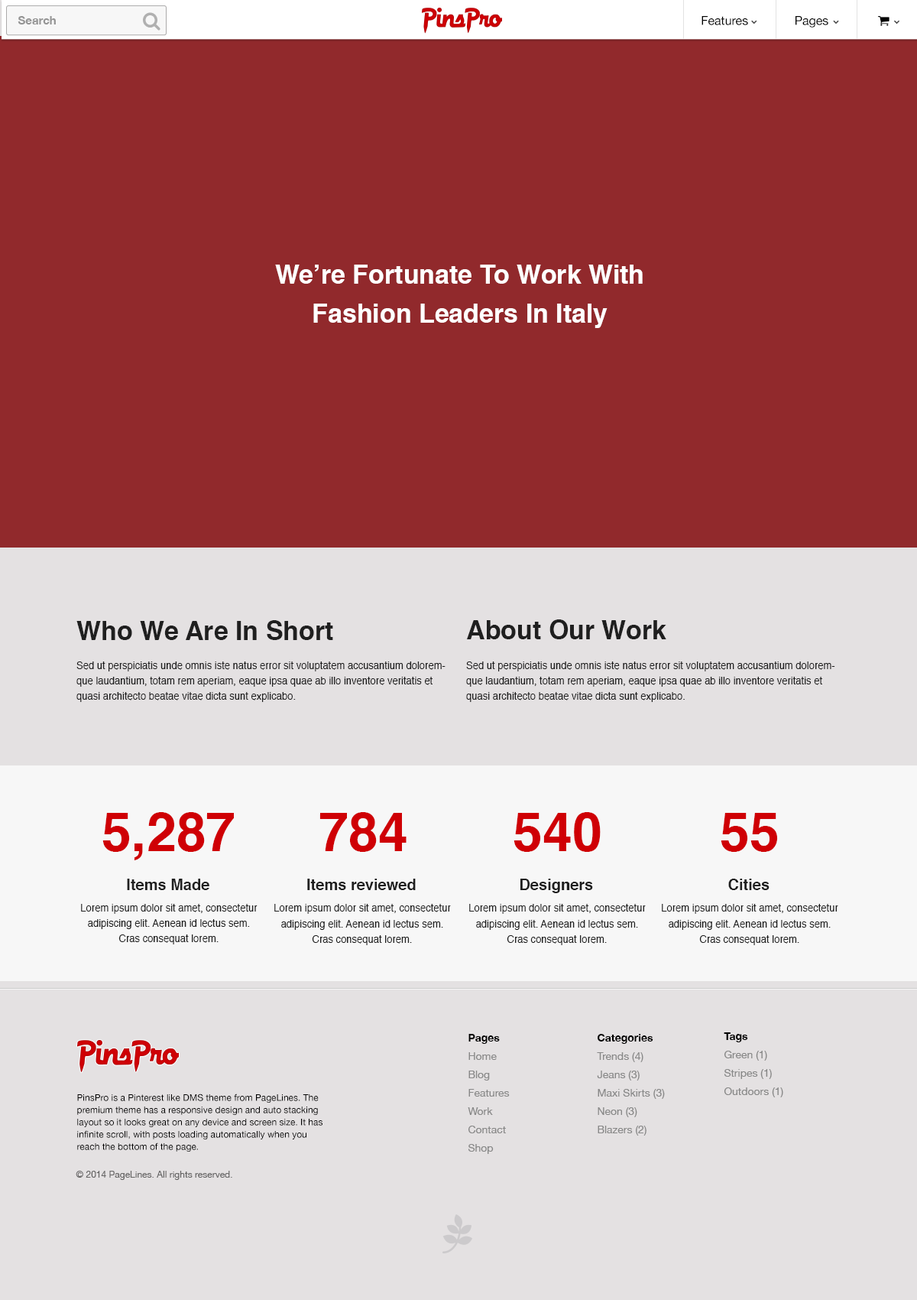
<style>
.page{position:relative;width:917px;height:1300px;background:#91292c}
.page>*{position:absolute;margin:0}
.t1{font:11.5px "HelveticaNeue-Bold";color:#959595}
.t2{font:26px/38.3px "Helvetica-Bold";color:#ffffff}
.t3{font:26px "Helvetica-Bold";color:#1f1f1f}
.t4{font:9.9px/15.3px "Helvetica";color:#1f1f1f}
.t5{font:53.6px "Helvetica-Bold";color:#cf0005}
.t6{font:15.3px "Helvetica-Bold";color:#1f1f1f}
.t7{font:10px/15.3px "Helvetica";color:#1f1f1f}
.t8{font:10.7px/18.3px "MyriadPro-Regular";color:#888888}
.t9{font:10.7px/18.3px "MyriadPro-Regular";color:#000000}
.t10{font:9.2px "HelveticaNeue";color:#000000}
.t11{font:9.2px "MyriadPro-Regular";color:#666565}
</style>
<div class="page">
<p class="t1" style="left:18px;top:16px;width:38px;height:8px">Search</p>
<p class="t2" style="left:275px;top:265px;width:368px;height:63px;text-align:center">We’re Fortunate To Work With<br>Fashion Leaders In Italy</p>
<p class="t3" style="left:76px;top:620px;width:257px;height:20px">Who We Are In Short</p>
<p class="t3" style="left:466px;top:619px;width:201px;height:20px">About Our Work</p>
<p class="t4" style="left:76px;top:661px;width:370px;height:41px">Sed ut perspiciatis unde omnis iste natus error sit voluptatem accusantium doloremque laudantium, totam rem aperiam, eaque ipsa quae ab illo inventore veritatis et quasi architecto beatae vitae dicta sunt explicabo.</p>
<p class="t4" style="left:466px;top:661px;width:370px;height:41px">Sed ut perspiciatis unde omnis iste natus error sit voluptatem accusantium doloremque laudantium, totam rem aperiam, eaque ipsa quae ab illo inventore veritatis et quasi architecto beatae vitae dicta sunt explicabo.</p>
<p class="t5" style="left:102px;top:812px;width:132px;height:48px">5,287</p>
<p class="t5" style="left:320px;top:812px;width:87px;height:40px">784</p>
<p class="t5" style="left:514px;top:812px;width:87px;height:40px">540</p>
<p class="t5" style="left:721px;top:813px;width:57px;height:39px">55</p>
<p class="t6" style="left:127px;top:878px;width:82px;height:12px">Items Made</p>
<p class="t6" style="left:307px;top:878px;width:109px;height:12px">Items reviewed</p>
<p class="t6" style="left:521px;top:878px;width:72px;height:15px">Designers</p>
<p class="t6" style="left:729px;top:878px;width:41px;height:12px">Cities</p>
<p class="t4" style="left:81px;top:904px;width:177px;height:40px;text-align:center">Lorem ipsum dolor sit amet, consectetur adipiscing elit. Aenean id lectus sem. Cras consequat lorem.</p>
<p class="t7" style="left:274px;top:904px;width:177px;height:41px;text-align:center">Lorem ipsum dolor sit amet, consectetur adipiscing elit. Aenean id lectus sem. Cras consequat lorem.</p>
<p class="t7" style="left:469px;top:904px;width:177px;height:41px;text-align:center">Lorem ipsum dolor sit amet, consectetur adipiscing elit. Aenean id lectus sem. Cras consequat lorem.</p>
<p class="t7" style="left:662px;top:904px;width:177px;height:41px;text-align:center">Lorem ipsum dolor sit amet, consectetur adipiscing elit. Aenean id lectus sem. Cras consequat lorem.</p>
<p class="t8" style="left:468px;top:1034px;width:42px;height:120px"><span class="t9">Pages<br></span>Home<br>Blog<br>Features<br>Work<br>Contact<br>Shop</p>
<p class="t8" style="left:597px;top:1034px;width:68px;height:101px"><span class="t9">Categories<br></span>Trends (4)<br>Jeans (3)<br>Maxi Skirts (3)<br>Neon (3)<br>Blazers (2)</p>
<p class="t8" style="left:724px;top:1032px;width:60px;height:65px"><span class="t9">Tags<br></span>Green (1)<br>Stripes (1)<br>Outdoors (1)</p>
<p class="t10" style="left:77px;top:1093px;width:246px;height:58px">PinsPro is a Pinterest like DMS theme from PageLines. The premium theme has a responsive design and auto stacking layout so it looks great on any device and screen size. It has infinite scroll, with posts loading automatically when you reach the bottom of the page.</p>
<p class="t11" style="left:76px;top:1171px;width:156px;height:9px">© 2014 PageLines. All rights reserved.</p>
</div>
